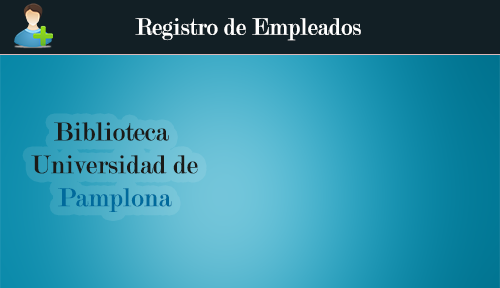
<style>
.page{position:relative;width:500px;height:288px}
.page>*{position:absolute;margin:0}
.t1{font:25.2px "Modern-Regular";color:#ffffff}
.t2{font:27.4px "Modern-Regular";color:#1b1a17}
.t3{font:27.4px "Modern-Regular";color:#006a9c}
</style>
<div class="page">
<p class="t1" style="left:135px;top:18px;width:226px;height:23px">Registro de Empleados</p>
<p class="t2" style="left:31px;top:122px;width:167px;height:90px;text-align:center">Biblioteca <br>Universidad de<br><span class="t3">Pamplona</span></p>
</div>
